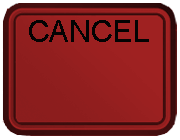
<style>
.page{position:relative;width:180px;height:140px}
.page>*{position:absolute;margin:0}
.t1{font:30px "ArialMT";color:#030303}
</style>
<div class="page">
<p class="t1" style="left:29px;top:20px;width:120px;height:22px">CANCEL</p>
</div>
